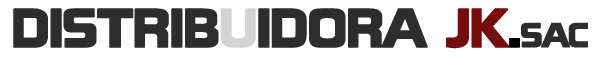
<style>
.page{position:relative;width:604px;height:60px;background:#ffffff}
.page>*{position:absolute;margin:0}
.t1{font:48px "BlackthornsDemo-Black";letter-spacing:-0.075em;color:#2d2d2d;font-weight:bold}
.t2{font:48px "BlackthornsDemo-Black";letter-spacing:-0.075em;color:#d6d3d3;font-weight:bold}
.t3{font:48px "BlackthornsDemo-Black";letter-spacing:-0.075em;color:#760c0c;font-weight:bold}
.t4{font:48px "BlackthornsDemo-Black";letter-spacing:-0.075em;color:#000000;font-weight:bold}
.t5{font:30px "BlackthornsDemo-Black";letter-spacing:-0.075em;color:#2d2d2d;font-weight:bold}
</style>
<div class="page">
<p class="t1" style="left:13px;top:8px;width:575px;height:41px">DISTRIB<span class="t2">U</span>IDORA <span class="t3">JK</span><span class="t4">.</span><span class="t5">SAC</span></p>
</div>
